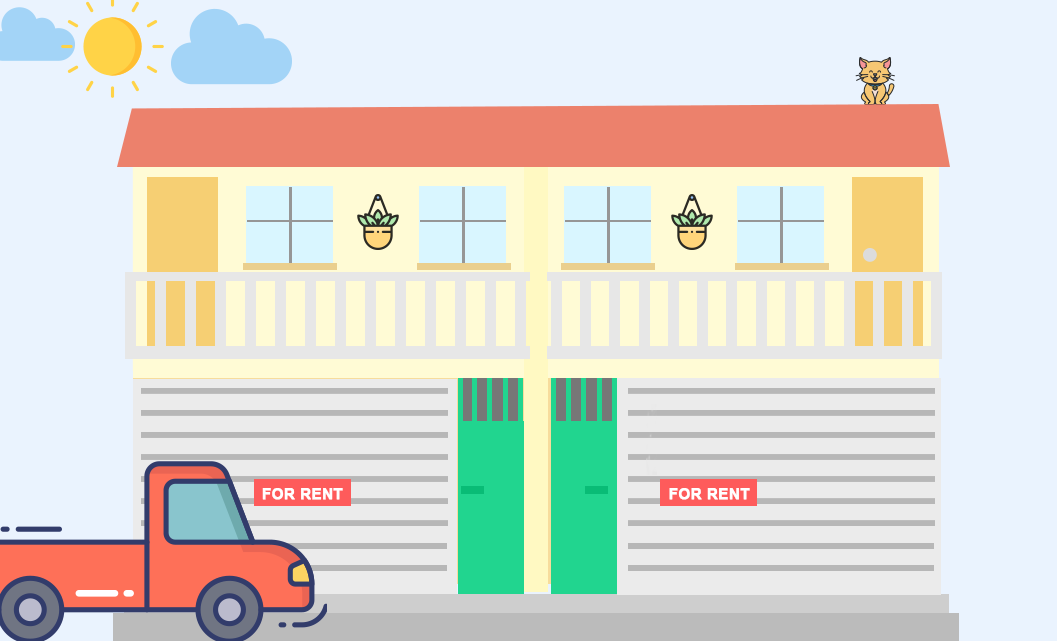
<style>
.page{position:relative;width:1057px;height:641px;background:#eaf3fe}
.page>*{position:absolute;margin:0}
.t1{font:15.2px "Arial-BoldMT";color:#ffffff;font-weight:bold}
</style>
<div class="page">
<p class="t1" style="left:262px;top:488px;width:81px;height:12px">FOR RENT</p>
<p class="t1" style="left:669px;top:488px;width:81px;height:12px">FOR RENT</p>
</div>
